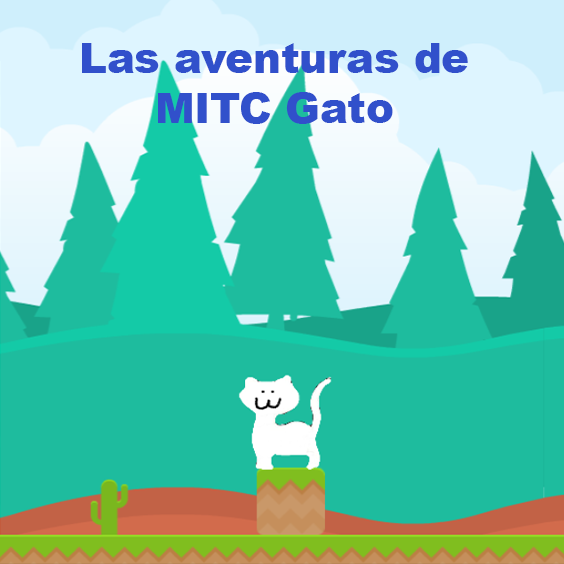
<style>
.page{position:relative;width:564px;height:564px;background:#1ebc9e}
.page>*{position:absolute;margin:0}
.t1{font:41.7px "Arial-Black";color:#3150cb}
</style>
<div class="page">
<p class="t1" style="left:82px;top:43px;width:386px;height:81px;text-align:center">Las aventuras de<br>MITC Gato</p>
</div>
